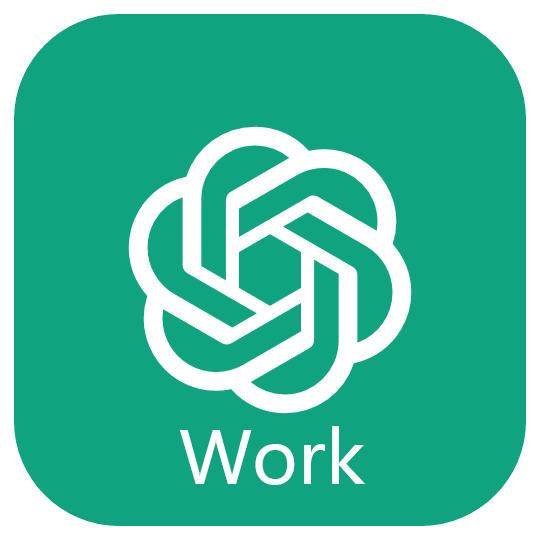
<style>
.page{position:relative;width:540px;height:540px;background:#10a37f}
.page>*{position:absolute;margin:0}
.t1{font:72px "MicrosoftYaHei";color:#ffffff}
</style>
<div class="page">
<p class="t1" style="left:180px;top:426px;width:186px;height:59px">Work</p>
</div>
